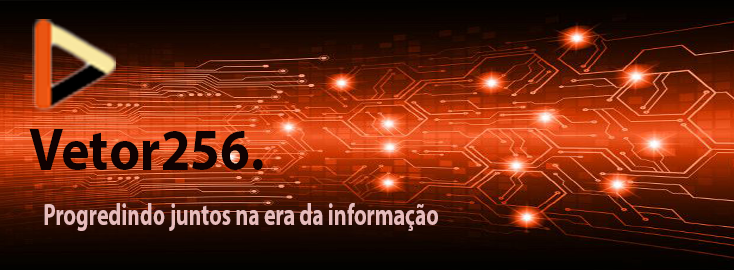
<style>
.page{position:relative;width:734px;height:270px}
.page>*{position:absolute;margin:0}
.t1{font:59.2px "MyriadPro-Bold";color:#100202;scale:0.91 1}
.t2{font:30.7px "MyriadPro-Bold";color:#e7bcbc;scale:0.71 1}
</style>
<div class="page">
<p class="t1" style="left:29px;top:129px;width:234px;height:41px">Vetor256.</p>
<p class="t2" style="left:44px;top:203px;width:394px;height:28px">Progredindo juntos na era da informação</p>
</div>
